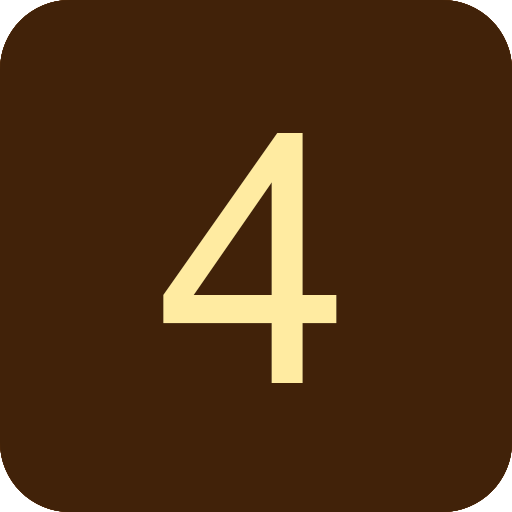
<style>
.page{position:relative;width:512px;height:512px;background:#412209}
.page>*{position:absolute;margin:0}
.t1{font:349px "ArialMT";color:#ffeba1}
</style>
<div class="page">
<p class="t1" style="left:163px;top:133px;width:174px;height:250px">4</p>
</div>
